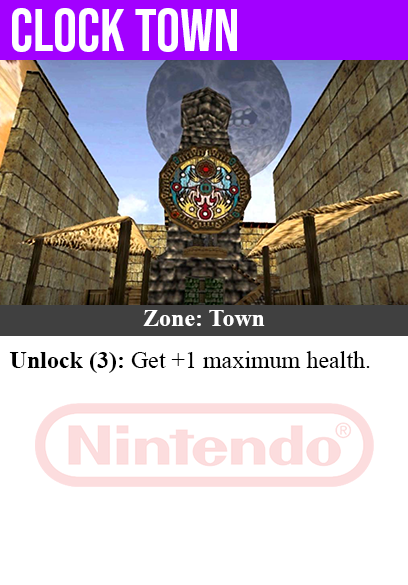
<style>
.page{position:relative;width:408px;height:585px;background:#ffffff}
.page>*{position:absolute;margin:0}
.t1{font:60px "BebasNeue-Regular";color:#ffffff}
.t2{font:24px "TimesNewRomanPS-BoldMT";color:#ffffff}
.t3{font:24px "TimesNewRomanPSMT";color:#000000}
.t4{font:24px "TimesNewRomanPS-BoldMT";color:#000000}
</style>
<div class="page">
<p class="t1" style="left:12px;top:8px;width:225px;height:44px">clock town</p>
<p class="t2" style="left:143px;top:310px;width:122px;height:16px">Zone: Town</p>
<p class="t3" style="left:9px;top:351px;width:361px;height:22px"><span class="t4">Unlock (3):</span> Get +1 maximum health.</p>
</div>
